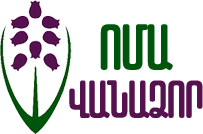
<style>
.page{position:relative;width:203px;height:134px;background:#ffffff}
.page>*{position:absolute;margin:0}
.t1{font:61.7px "BraindYerevanRegular";letter-spacing:-0.05em;color:#00550c}
.t2{font:50.6px "BraindYerevanRegular";letter-spacing:-0.05em;color:#56124f}
</style>
<div class="page">
<p class="t1" style="left:100px;top:24px;width:73px;height:46px">ՈՄԱ</p>
<p class="t2" style="left:69px;top:80px;width:134px;height:38px">ՎԱՆԱՁՈՐ</p>
</div>
